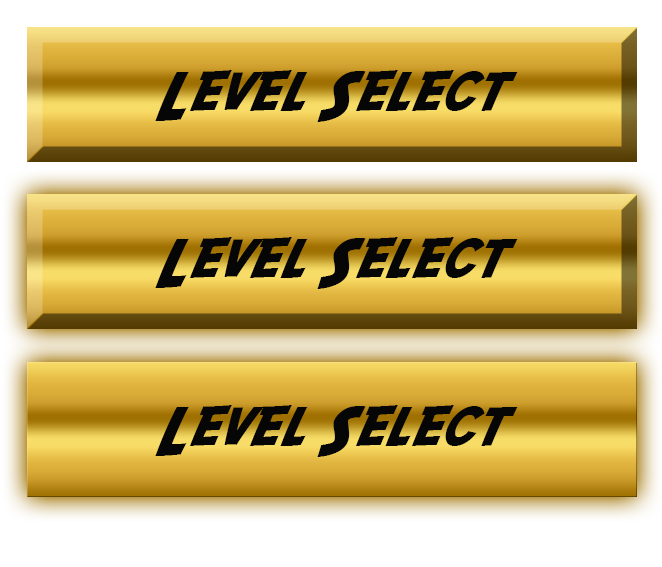
<style>
.page{position:relative;width:662px;height:567px}
.page>*{position:absolute;margin:0}
.t1{font:55.3px "SFFedora";letter-spacing:-0.005em;color:#060606;scale:1.05 1}
</style>
<div class="page">
<p class="t1" style="left:155px;top:70px;width:363px;height:52px">Level Select</p>
<p class="t1" style="left:155px;top:237px;width:363px;height:52px">Level Select</p>
<p class="t1" style="left:155px;top:405px;width:363px;height:52px">Level Select</p>
</div>
